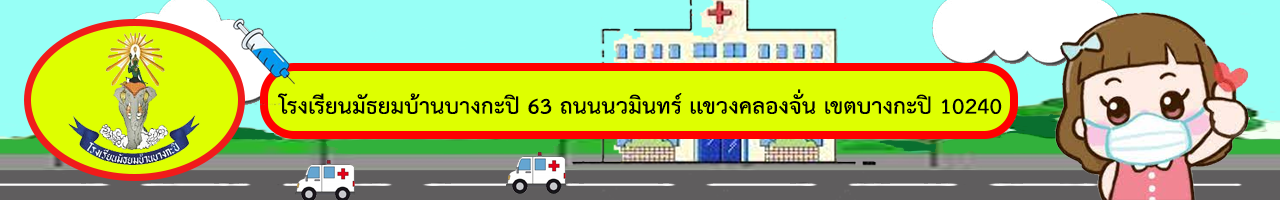
<style>
.page{position:relative;width:1280px;height:200px;background:#deff00}
.page>*{position:absolute;margin:0}
.t1{font:30.8px "THSarabunPSK-Bold";color:#000000;scale:1.07 1}
</style>
<div class="page">
<p class="t1" style="left:278px;top:89px;width:724px;height:25px">โรงเรียนมัธยมบ้านบางกะปิ 63 ถนนนวมินทร์ เเขวงคลองจั่น เขตบางกะปิ 10240</p>
</div>
